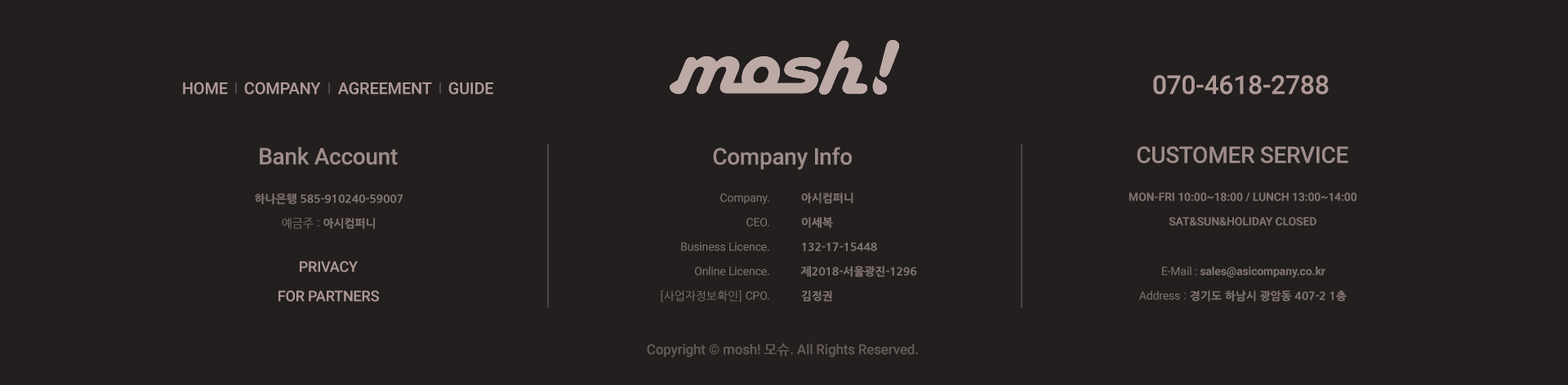
<style>
.page{position:relative;width:1568px;height:385px;background:#221f1e}
.page>*{position:absolute;margin:0}
.t1{font:26.1px "Roboto-Medium";letter-spacing:-0.01em;color:#ae9995}
.t2{font:16.3px "Roboto-Medium";letter-spacing:-0.01em;color:#ae9995}
.t3{font:22.9px "Roboto-Medium";letter-spacing:-0.01em;color:#9d8c88}
.t4{font:11.4px/24.5px "NanumGothicExtraBold";letter-spacing:-0.01em;color:#7e716e}
.t5{font:11.4px/24.5px "NanumGothic";letter-spacing:-0.01em;color:#7e716e}
.t6{font:11.4px/24.5px "Roboto-Regular";letter-spacing:-0.01em;color:#7e716e}
.t7{font:11.4px/24.5px "Roboto-Bold";letter-spacing:-0.01em;color:#7e716e}
.t8{font:14.7px "Roboto-Medium";letter-spacing:-0.01em;color:#ae9995}
.t9{font:11.4px "Roboto-Bold";letter-spacing:-0.01em;color:#7e716e}
.t10{font:11.4px "Roboto-Regular";letter-spacing:-0.01em;color:#7e716e}
.t11{font:11.4px "NanumGothicExtraBold";letter-spacing:-0.01em;color:#7e716e}
.t12{font:11.4px "NanumGothic";letter-spacing:-0.01em;color:#7e716e}
.t13{font:13.9px "Roboto-Medium";letter-spacing:-0.01em;color:#645a57}
.t14{font:13.9px "NanumGothicBold";letter-spacing:-0.01em;color:#645a57}
</style>
<div class="page">
<p class="t1" style="left:1153px;top:75px;width:176px;height:20px">070-4618-2788</p>
<p class="t2" style="left:183px;top:82px;width:45px;height:13px">HOME</p>
<p class="t2" style="left:244px;top:82px;width:77px;height:13px">COMPANY</p>
<p class="t2" style="left:338px;top:82px;width:94px;height:13px">AGREEMENT</p>
<p class="t2" style="left:448px;top:82px;width:45px;height:13px">GUIDE</p>
<p class="t3" style="left:260px;top:147px;width:138px;height:18px">Bank Account</p>
<p class="t3" style="left:713px;top:147px;width:139px;height:23px">Company Info</p>
<p class="t3" style="left:1137px;top:146px;width:211px;height:17px">CUSTOMER SERVICE</p>
<p class="t4" style="left:255px;top:194px;width:148px;height:35px;text-align:center">하나은행 585-910240-59007<br><span class="t5">예금주 : </span>아시컴퍼니</p>
<p class="t6" style="left:661px;top:194px;width:108px;height:108px;text-align:right">Company.<br>CEO.<br>Business Licence.<br>Online Licence.<br><span class="t5">[사업자정보확인] </span>CPO.</p>
<p class="t4" style="left:800px;top:193px;width:116px;height:109px">아시컴퍼니<br>이세복<br>132-17-15448<br>제2018-서울광진-1296<br>김정권</p>
<p class="t7" style="left:1129px;top:193px;width:227px;height:33px;text-align:center">MON-FRI 10:00~18:00 / LUNCH 13:00~14:00<br>SAT&amp;SUN&amp;HOLIDAY CLOSED</p>
<p class="t8" style="left:300px;top:261px;width:58px;height:12px">PRIVACY</p>
<p class="t9" style="left:1162px;top:266px;width:163px;height:12px"><span class="t10">E-Mail : </span>sales@asicompany.co.kr</p>
<p class="t8" style="left:278px;top:291px;width:101px;height:11px">FOR PARTNERS</p>
<p class="t11" style="left:1139px;top:291px;width:208px;height:11px"><span class="t10">Address</span><span class="t12"> : </span>경기도 하남시 광암동 407-2 1층</p>
<p class="t13" style="left:647px;top:344px;width:271px;height:14px">Copyright © mosh! <span class="t14">모슈</span>. All Rights Reserved.</p>
</div>
